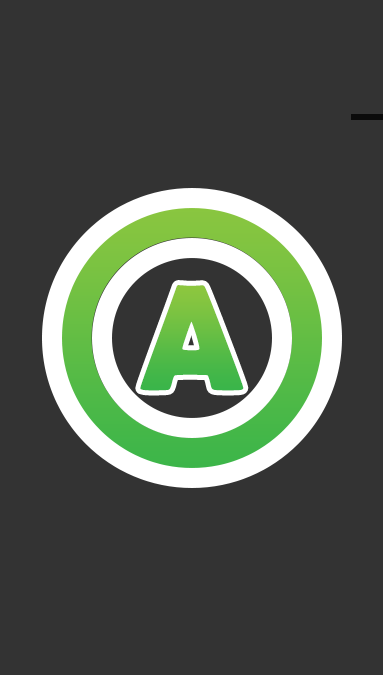
<style>
.page{position:relative;width:383px;height:675px;background:#333333}
.page>*{position:absolute;margin:0}
.t1{font:150px "BerlinSansFBDemi-Bold";letter-spacing:0.2em}
</style>
<div class="page">
<p class="t1" style="left:140px;top:285px;width:104px;height:106px">A</p>
</div>
